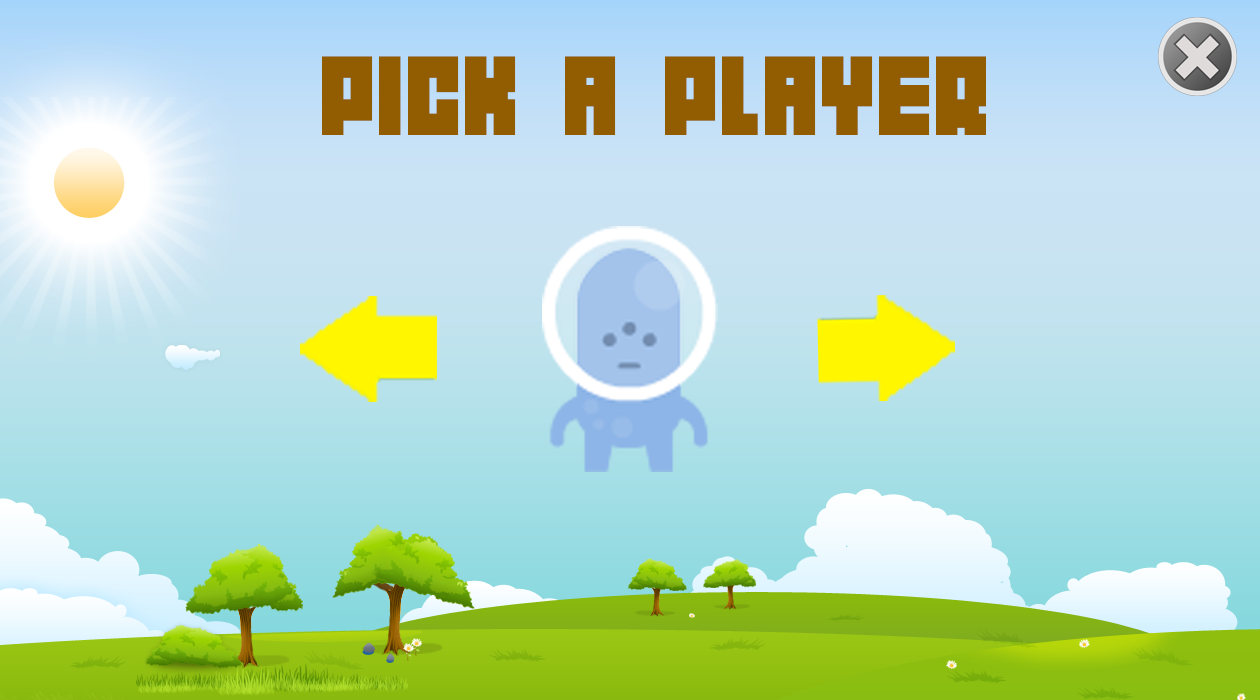
<style>
.page{position:relative;width:1260px;height:700px}
.page>*{position:absolute;margin:0}
.t1{font:100px "04b19";color:#925d01}
</style>
<div class="page">
<p class="t1" style="left:322px;top:56px;width:664px;height:79px">PICK A PLAYER</p>
</div>
